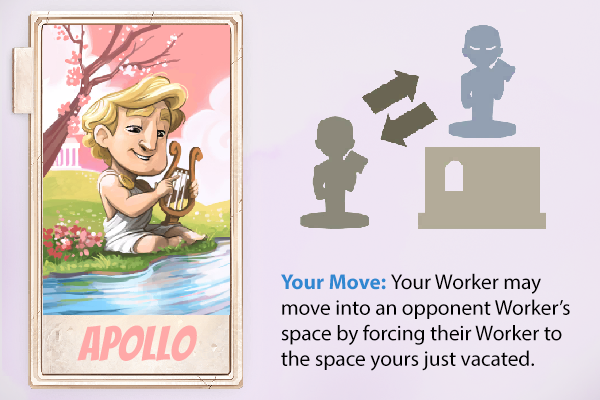
<style>
.page{position:relative;width:600px;height:400px}
.page>*{position:absolute;margin:0}
.t1{font:21.3px "MyriadPro-Regular";color:#000000}
.t2{font:21.3px "MyriadPro-Bold";color:#3188d1}
.t3{font:48px "Bangers-Regular";color:#ffa9a8}
</style>
<div class="page">
<p class="t1" style="left:281px;top:273px;width:289px;height:98px"><span class="t2">Your Move: </span>Your Worker may move into an opponent Worker’s space by forcing their Worker to the space yours just vacated.</p>
<p class="t3" style="left:77px;top:325px;width:120px;height:36px">apollo</p>
</div>
